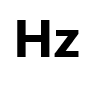
<style>
.page{position:relative;width:96px;height:96px;background:#ffffff}
.page>*{position:absolute;margin:0}
.t1{font:52.6px "Gadugi-Bold";color:#000000}
</style>
<div class="page">
<p class="t1" style="left:17px;top:20px;width:62px;height:37px">Hz</p>
</div>
